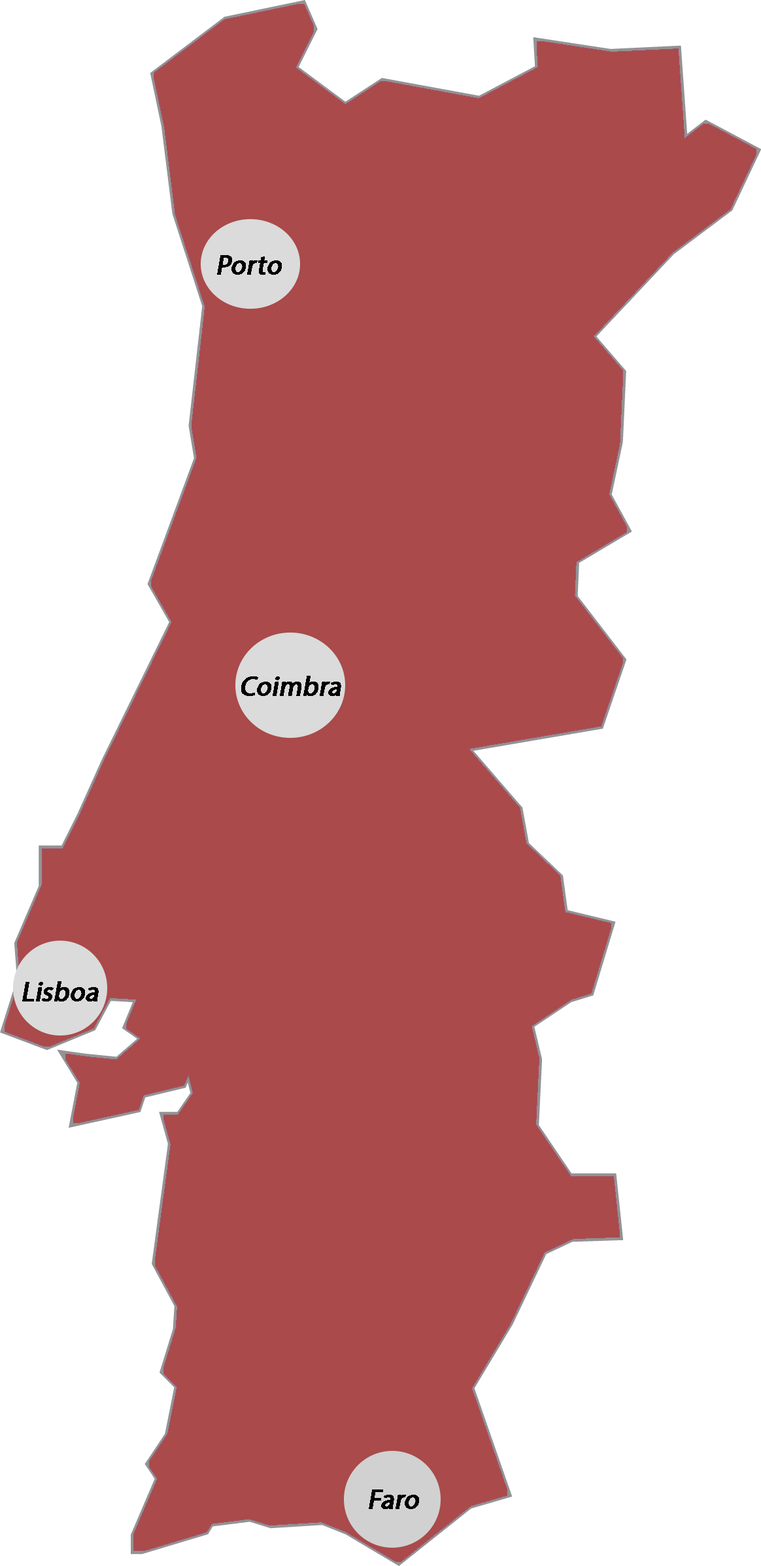
<style>
.page{position:relative;width:761px;height:1566px;background:#aa4a4a}
.page>*{position:absolute;margin:0}
.t1{font:27.3px "MyriadPro-Regular";color:#000000;font-weight:bold;font-style:italic}
.t2{font:27.3px "MyriadPro-Regular";color:#010000;font-weight:bold;font-style:italic}
</style>
<div class="page">
<p class="t1" style="left:217px;top:255px;width:65px;height:20px">Porto</p>
<p class="t2" style="left:241px;top:676px;width:100px;height:20px">Coimbra</p>
<p class="t1" style="left:22px;top:981px;width:77px;height:21px">Lisboa</p>
<p class="t1" style="left:369px;top:1490px;width:50px;height:19px">Faro</p>
</div>
